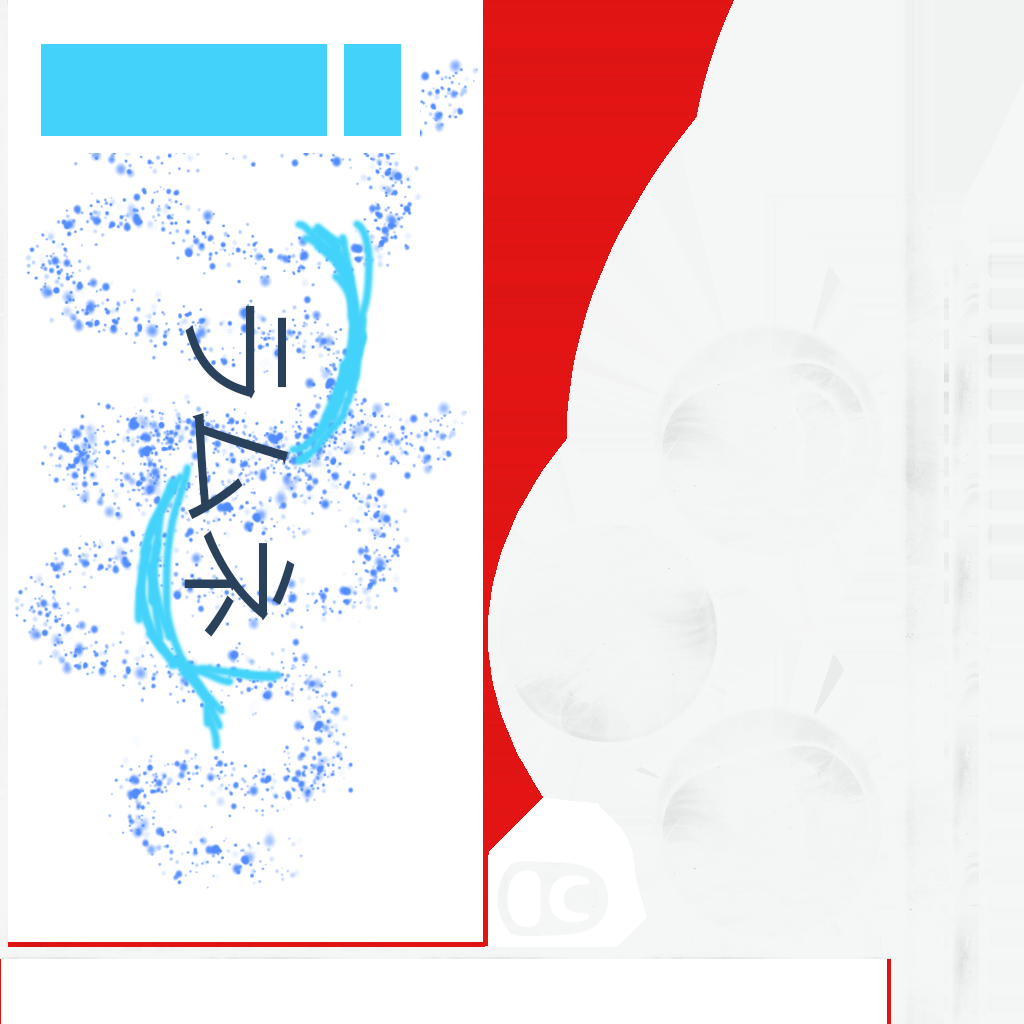
<style>
.page{position:relative;width:1024px;height:1024px;background:#ffffff}
.page>*{position:absolute;margin:0}
.t1{font:121.5px "KozGoPr6N-Regular";color:#29415a}
</style>
<div class="page">
<p class="t1" style="left:184px;top:305px;width:111px;height:332px;rotate:90deg">ラムネ</p>
</div>
